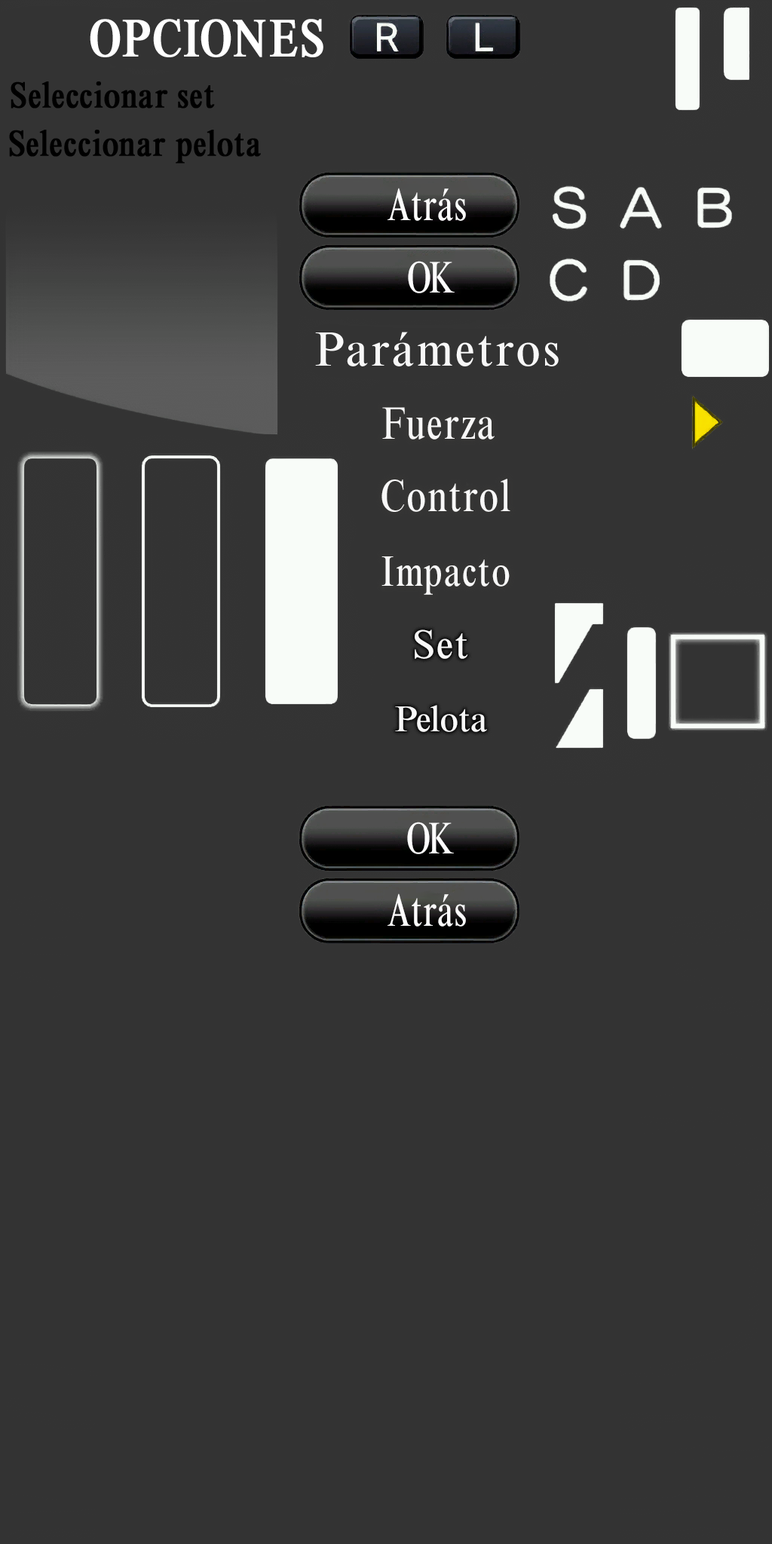
<style>
.page{position:relative;width:772px;height:1544px;background:#333333}
.page>*{position:absolute;margin:0}
.t1{font:52.8px "TimesNewRomanMTStd-Cond";letter-spacing:0.04em;color:#ffffff;font-weight:bold}
.t2{font:35.9px "TimesNewRomanMTStd-Cond";letter-spacing:0.02em;color:#000000;font-weight:bold}
.t3{font:45.6px "TimesNewRomanMTStd-Cond";letter-spacing:0.02em;color:#fdfdfd;scale:0.9 1}
.t4{font:44.9px "TimesNewRomanMTStd-Cond";letter-spacing:-0.02em;color:#fdfdfd;scale:0.91 1}
.t5{font:48.8px "TimesNewRomanMTStd-Cond";letter-spacing:0.05em;color:#f8f8f8;scale:1.14 1}
.t6{font:46px "TimesNewRomanMTStd-Cond";letter-spacing:0.04em;color:#f8f8f8}
.t7{font:45.3px "TimesNewRomanMTStd-Cond";letter-spacing:0.04em;color:#f8f8f8}
.t8{font:43.2px "TimesNewRomanMTStd-Cond";letter-spacing:0.04em;color:#f8f8f8}
.t9{font:40.7px "TimesNewRomanMTStd-Cond";letter-spacing:0.04em;color:#f8f8f8;scale:1.18 1}
.t10{font:36.6px "TimesNewRomanMTStd-Cond";color:#f8f8f8;scale:1.17 1}
</style>
<div class="page">
<p class="t1" style="left:90px;top:19px;width:233px;height:38px">OPCIONES</p>
<p class="t2" style="left:11px;top:81px;width:204px;height:28px">Seleccionar set</p>
<p class="t2" style="left:9px;top:130px;width:252px;height:34px">Seleccionar pelota</p>
<p class="t3" style="left:388px;top:188px;width:78px;height:33px">Atrás</p>
<p class="t4" style="left:408px;top:261px;width:47px;height:32px">OK</p>
<p class="t5" style="left:315px;top:332px;width:244px;height:34px">Parámetros</p>
<p class="t6" style="left:382px;top:407px;width:113px;height:33px">Fuerza</p>
<p class="t7" style="left:382px;top:479px;width:128px;height:33px">Control</p>
<p class="t8" style="left:382px;top:556px;width:128px;height:39px">Impacto</p>
<p class="t9" style="left:415px;top:630px;width:53px;height:29px">Set</p>
<p class="t10" style="left:395px;top:705px;width:92px;height:27px">Pelota</p>
<p class="t4" style="left:407px;top:822px;width:47px;height:32px">OK</p>
<p class="t3" style="left:388px;top:894px;width:78px;height:33px">Atrás</p>
</div>
